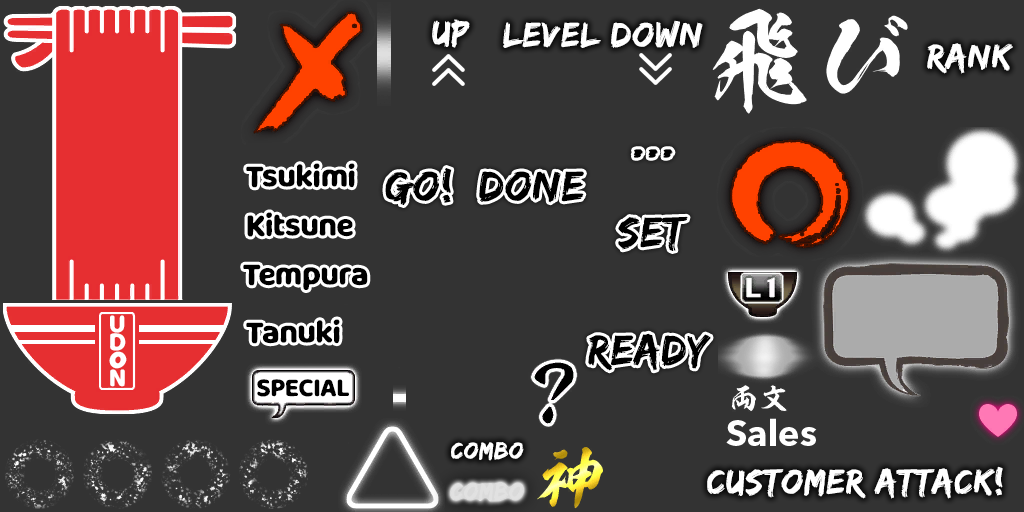
<style>
.page{position:relative;width:1024px;height:512px;background:#333333}
.page>*{position:absolute;margin:0}
.t1{font:36px "EdoSZ";letter-spacing:0.03em;color:#ffffff}
.t2{font:44px "EdoSZ";letter-spacing:0.03em;color:#000000}
.t3{font:30px "MilkyNiceClean";letter-spacing:-0.01em;color:#000000}
.t4{font:44px "EdoSZ";letter-spacing:0.03em;color:#010101}
.t5{font:24px/18px "MilkyNiceClean";color:#ffffff}
.t6{font:24px "MilkyNiceClean";color:#000000}
.t7{font:36px "AvenirNextLTPro-Bold";color:#ffffff}
.t8{font:24px "EdoSZ";letter-spacing:0.03em;color:#ffffff}
.t9{font:24px "EdoSZ";letter-spacing:0.03em;color:#e1e1e1}
</style>
<div class="page">
<p class="t1" style="left:432px;top:19px;width:38px;height:29px">up</p>
<p class="t1" style="left:503px;top:22px;width:98px;height:26px">LEVEL</p>
<p class="t1" style="left:611px;top:20px;width:92px;height:28px">DOWN</p>
<p class="t1" style="left:927px;top:43px;width:86px;height:31px">RANK</p>
<p class="t2" style="left:633px;top:149px;width:40px;height:9px">...</p>
<p class="t3" style="left:246px;top:163px;width:109px;height:25px">Tsukimi</p>
<p class="t2" style="left:385px;top:168px;width:67px;height:37px">Go!</p>
<p class="t2" style="left:479px;top:171px;width:105px;height:32px">DONE</p>
<p class="t3" style="left:247px;top:212px;width:106px;height:25px">Kitsune</p>
<p class="t4" style="left:618px;top:216px;width:70px;height:35px">set</p>
<p class="t3" style="left:243px;top:264px;width:125px;height:26px">Tempura</p>
<p class="t5" style="left:109px;top:315px;width:18px;height:72px">U<br>D<br>O<br>N</p>
<p class="t3" style="left:246px;top:319px;width:94px;height:25px">Tanuki</p>
<p class="t2" style="left:588px;top:333px;width:123px;height:38px">rEADY</p>
<p class="t6" style="left:257px;top:379px;width:92px;height:18px">SPECIAL</p>
<p class="t7" style="left:726px;top:418px;width:91px;height:28px">Sales</p>
<p class="t8" style="left:451px;top:442px;width:73px;height:19px">combo</p>
<p class="t1" style="left:707px;top:466px;width:296px;height:33px">CUSTOMER ATTACK!</p>
<p class="t9" style="left:451px;top:483px;width:73px;height:19px">combo</p>
</div>
